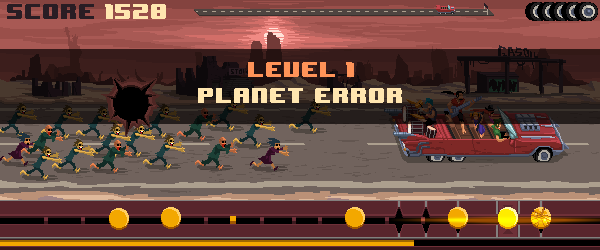
<style>
.page{position:relative;width:600px;height:250px}
.page>*{position:absolute;margin:0}
.t1{font:18px "8BITWONDERNominal";color:#ff9358;text-transform:uppercase}
.t2{font:18px "8BITWONDERNominal";color:#ffe6b0;text-transform:uppercase}
</style>
<div class="page">
<p class="t1" style="left:248px;top:62px;width:106px;height:15px">LEVEL 1</p>
<p class="t2" style="left:198px;top:88px;width:204px;height:15px">Planet error</p>
</div>
